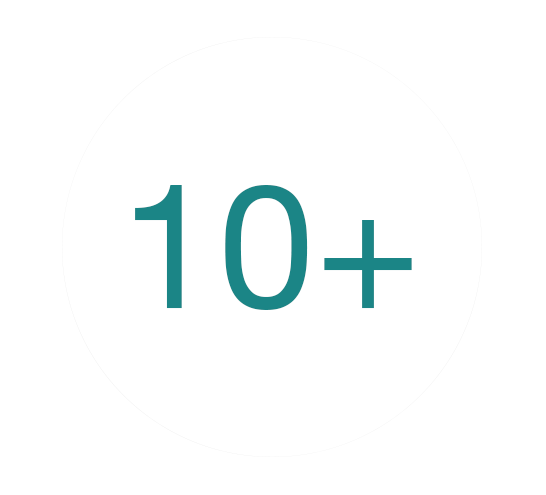
<style>
.page{position:relative;width:546px;height:495px;background:#ffffff}
.page>*{position:absolute;margin:0}
.t1{font:173.3px "HelveticaNeue";letter-spacing:0.01em;color:#1b8586}
</style>
<div class="page">
<p class="t1" style="left:135px;top:185px;width:277px;height:125px">10+</p>
</div>
